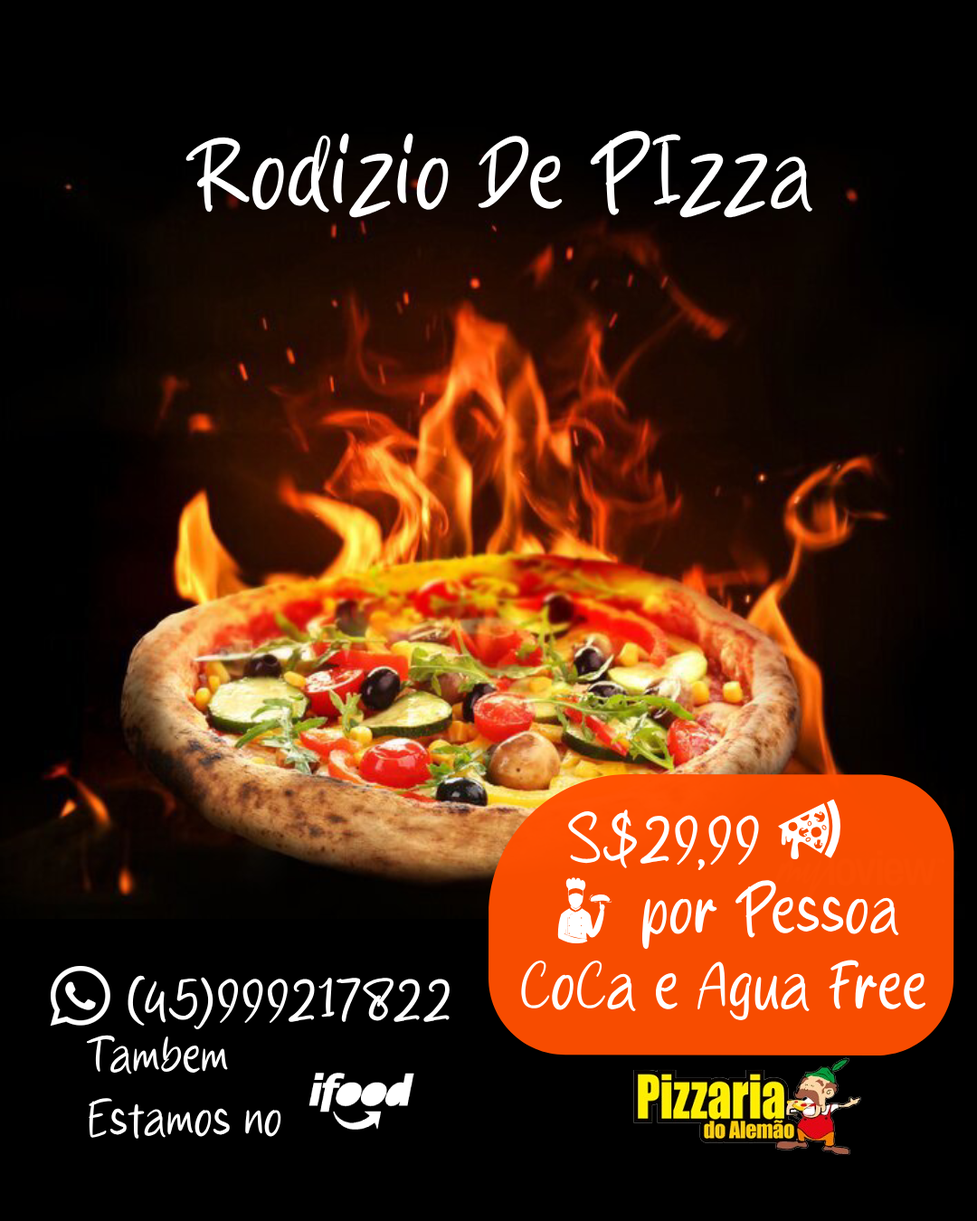
<style>
.page{position:relative;width:977px;height:1221px;background:#000000}
.page>*{position:absolute;margin:0}
.t1{font:104.1px "Pizzat";color:#ffffff}
.t2{font:70.8px "Pizzat";color:#ffffff}
.t3{font:85.8px "Pizza";color:#ffffff}
.t4{font:94px "Pizza";color:#ffffff}
.t5{font:63.2px "Pizzat";color:#ffffff}
.t6{font:53px "Pizzat";color:#ffffff}
</style>
<div class="page">
<p class="t1" style="left:185px;top:130px;width:627px;height:88px">Rodizio De PIzza</p>
<p class="t2" style="left:568px;top:809px;width:191px;height:61px">S$29,99</p>
<p class="t3" style="left:778px;top:799px;width:62px;height:60px">u</p>
<p class="t4" style="left:557px;top:877px;width:55px;height:66px">i</p>
<p class="t2" style="left:641px;top:880px;width:258px;height:70px">por Pessoa</p>
<p class="t2" style="left:521px;top:960px;width:405px;height:60px">CoCa e Agua Free</p>
<p class="t5" style="left:128px;top:975px;width:321px;height:54px">(45)999217822</p>
<p class="t6" style="left:86px;top:1035px;width:195px;height:104px">Também <br>Estamos no</p>
</div>
